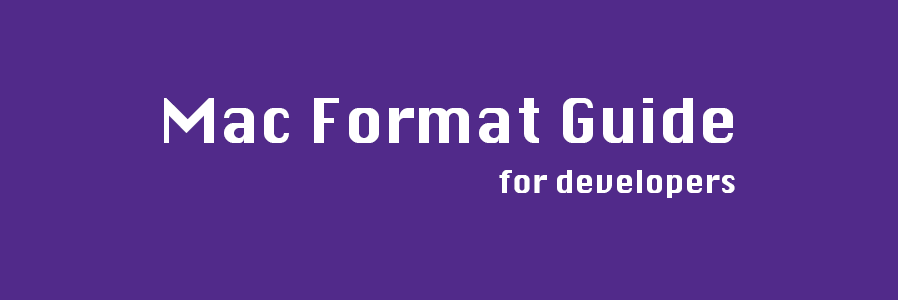
<style>
.page{position:relative;width:898px;height:300px;background:#512a8a}
.page>*{position:absolute;margin:0}
.t1{font:60px "Krungthep";color:#ffffff}
.t2{font:30px "Krungthep";color:#ffffff}
</style>
<div class="page">
<p class="t1" style="left:164px;top:98px;width:569px;height:45px">Mac Format Guide</p>
<p class="t2" style="left:499px;top:170px;width:236px;height:28px">for developers</p>
</div>
